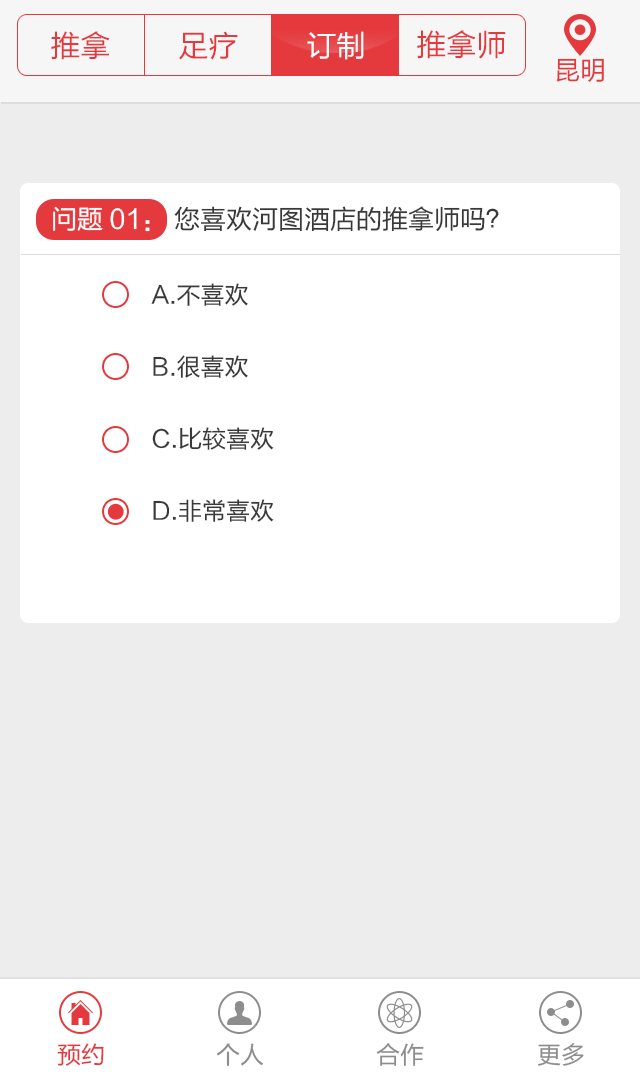
<style>
.page{position:relative;width:640px;height:1080px;background:#ffffff}
.page>*{position:absolute;margin:0}
.t1{font:30px "FZLTHJW--GB1-0";color:#e43a3d}
.t2{font:30px "FZLTHJW--GB1-0";color:#ffffff}
.t3{font:26px "FZLTHJW--GB1-0";color:#e43a3d}
.t4{font:26px "FZLTHJW--GB1-0";color:#ffffff}
.t5{font:26px "FZLTHJW--GB1-0";color:#393939}
.t6{font:24px/72px "FZLTHJW--GB1-0";color:#393939}
.t7{font:24px "FZLTHJW--GB1-0";color:#e43a3d}
.t8{font:24px "FZLTHJW--GB1-0";color:#8d8d8d}
</style>
<div class="page">
<p class="t1" style="left:417px;top:30px;width:89px;height:29px">推拿师</p>
<p class="t1" style="left:51px;top:31px;width:59px;height:29px">推拿</p>
<p class="t1" style="left:179px;top:31px;width:59px;height:29px">足疗</p>
<p class="t2" style="left:307px;top:31px;width:57px;height:29px">订制</p>
<p class="t3" style="left:556px;top:58px;width:48px;height:24px">昆明</p>
<p class="t4" style="left:53px;top:206px;width:97px;height:26px">问题01：</p>
<p class="t5" style="left:174px;top:206px;width:325px;height:26px">您喜欢河图酒店的推拿师吗？</p>
<p class="t6" style="left:151px;top:283px;width:123px;height:239px">A.不喜欢<br>B.很喜欢<br>C.比较喜欢<br>D.非常喜欢</p>
<p class="t7" style="left:57px;top:1043px;width:47px;height:23px">预约</p>
<p class="t8" style="left:216px;top:1043px;width:47px;height:23px">个人</p>
<p class="t8" style="left:376px;top:1043px;width:48px;height:23px">合作</p>
<p class="t8" style="left:538px;top:1043px;width:46px;height:23px">更多</p>
</div>
